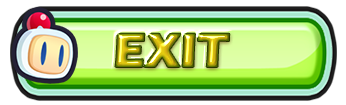
<style>
.page{position:relative;width:346px;height:105px}
.page>*{position:absolute;margin:0}
.t1{font:50px "ErasITC-Bold"}
</style>
<div class="page">
<p class="t1" style="left:115px;top:33px;width:115px;height:34px">EXIT</p>
</div>
